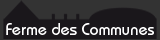
<style>
.page{position:relative;width:160px;height:40px;background:#1a171b}
.page>*{position:absolute;margin:0}
.t1{font:16px "DynameSSK";color:#ffffff}
</style>
<div class="page">
<p class="t1" style="left:6px;top:23px;width:148px;height:12px">Ferme des Communes</p>
</div>
